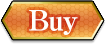
<style>
.page{position:relative;width:106px;height:44px}
.page>*{position:absolute;margin:0}
.t1{font:28px "RyuminPro-ExBold";letter-spacing:-0.04em;color:#fffffa}
</style>
<div class="page">
<p class="t1" style="left:29px;top:10px;width:49px;height:25px">Buy</p>
</div>
